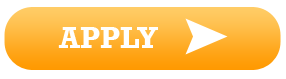
<style>
.page{position:relative;width:286px;height:79px;background:#ffffff}
.page>*{position:absolute;margin:0}
.t1{font:30px "Rockwell-Bold";color:#ffffff}
</style>
<div class="page">
<p class="t1" style="left:58px;top:27px;width:100px;height:21px">APPLY</p>
</div>
